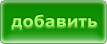
<style>
.page{position:relative;width:107px;height:44px}
.page>*{position:absolute;margin:0}
.t1{font:16px "Verdana-Bold";color:#acff68}
</style>
<div class="page">
<p class="t1" style="left:11px;top:14px;width:86px;height:16px">добавить</p>
</div>
